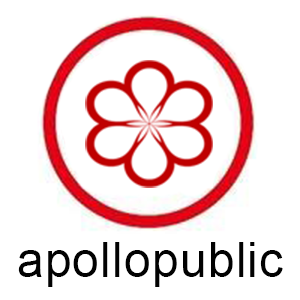
<style>
.page{position:relative;width:300px;height:300px;background:#ffffff}
.page>*{position:absolute;margin:0}
.t1{font:48px "ArialMT";letter-spacing:0.025em;color:#020202}
</style>
<div class="page">
<p class="t1" style="left:18px;top:242px;width:265px;height:45px">apollopublic</p>
</div>
